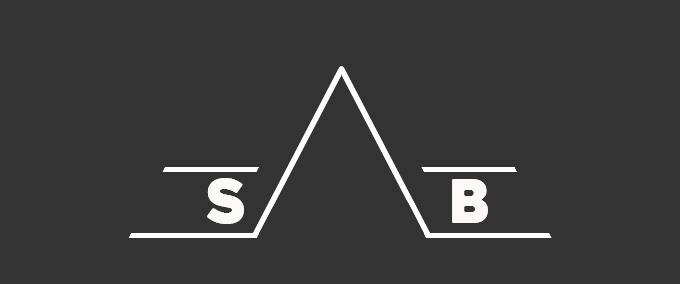
<style>
.page{position:relative;width:680px;height:284px;background:#333333}
.page>*{position:absolute;margin:0}
.t1{font:60px "Heavitas";color:#fef9f9}
</style>
<div class="page">
<p class="t1" style="left:207px;top:178px;width:37px;height:46px">S</p>
<p class="t1" style="left:452px;top:179px;width:36px;height:44px">B</p>
</div>
